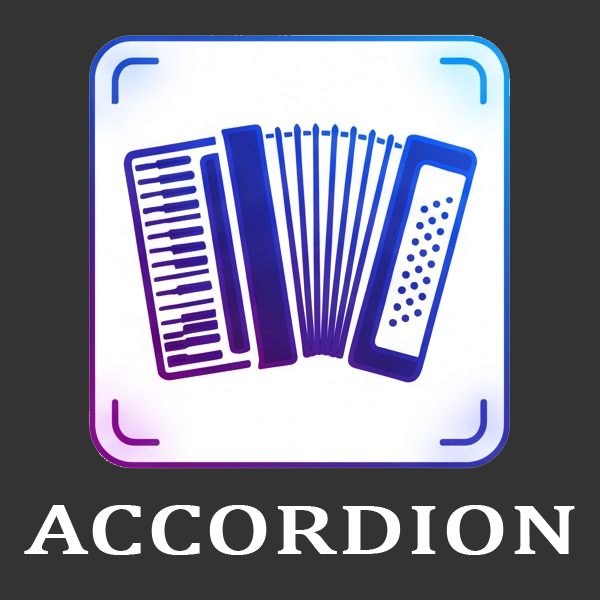
<style>
.page{position:relative;width:600px;height:600px;background:#333333}
.page>*{position:absolute;margin:0}
.t1{font:70px "CambriaMath";color:#ffffff;font-weight:bold;scale:1.43 1}
</style>
<div class="page">
<p class="t1" style="left:24px;top:505px;width:551px;height:50px">ACCORDION</p>
</div>
